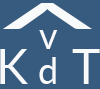
<style>
.page{position:relative;width:100px;height:89px;background:#375a7f}
.page>*{position:absolute;margin:0}
.t1{font:68.8px "Lato-Regular";color:#f8f9fb;scale:2.88 1}
.t2{font:36px "Lato-Regular";color:#f8f9fb}
.t3{font:48px "Lato-Regular";color:#f8f9fb}
</style>
<div class="page">
<p class="t1" style="left:3px;top:3px;width:89px;height:26px">^</p>
<p class="t2" style="left:39px;top:30px;width:19px;height:19px">v</p>
<p class="t3" style="left:0px;top:49px;width:28px;height:35px">K</p>
<p class="t3" style="left:72px;top:49px;width:28px;height:35px">T</p>
<p class="t2" style="left:39px;top:57px;width:17px;height:27px">d</p>
</div>
